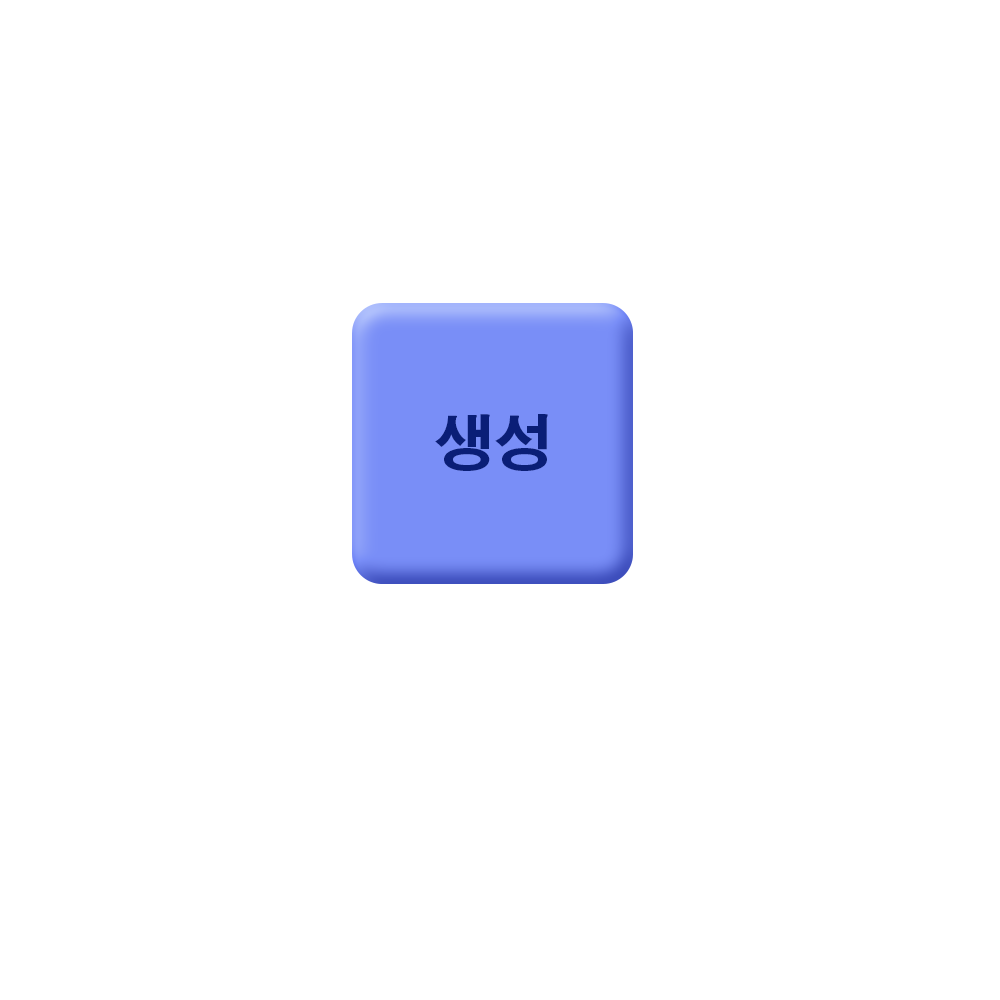
<style>
.page{position:relative;width:1000px;height:1000px;background:#ffffff}
.page>*{position:absolute;margin:0}
.t1{font:60px "AdobeGothicStd-Bold";color:#0a1e77}
</style>
<div class="page">
<p class="t1" style="left:435px;top:414px;width:113px;height:57px">생성</p>
</div>
